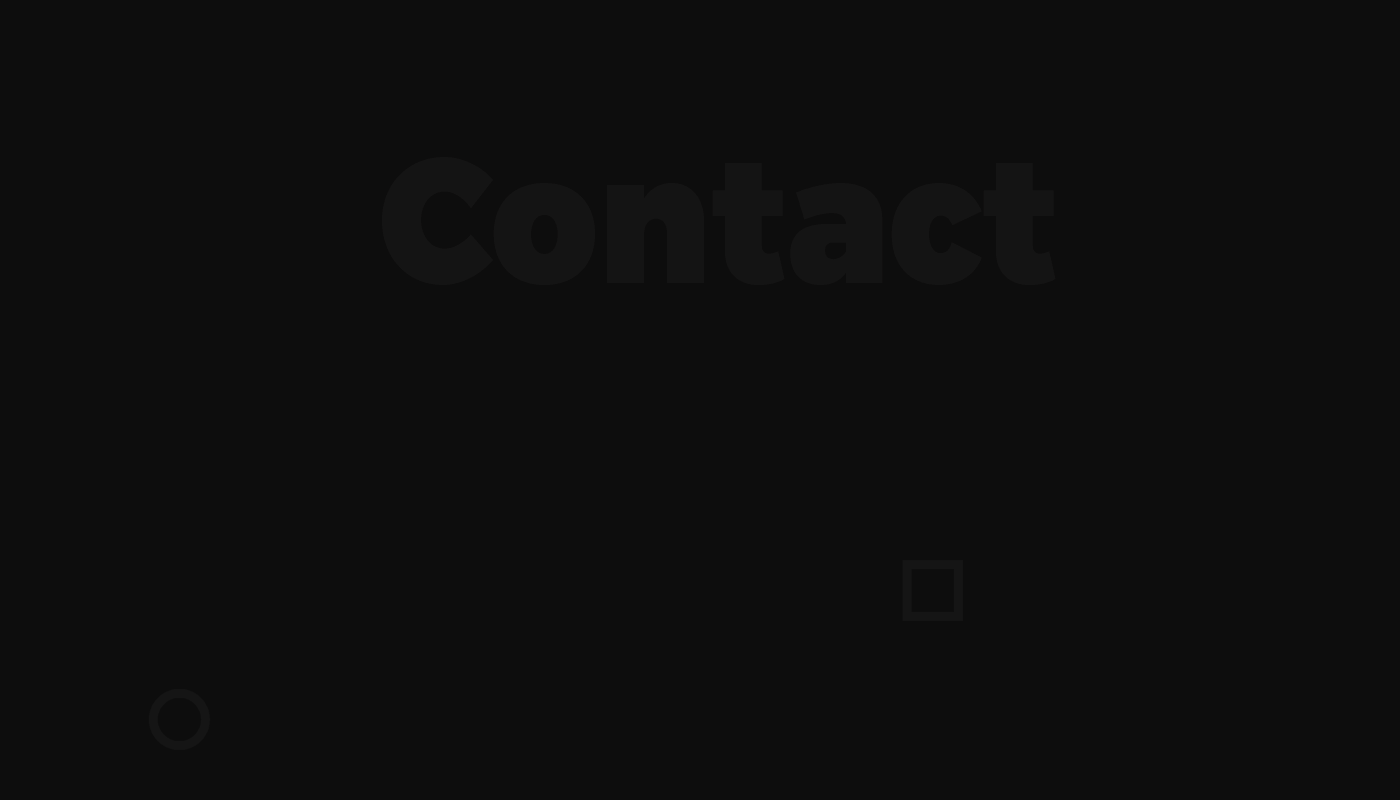
<style>
.page{position:relative;width:1400px;height:800px;background:#0d0d0d}
.page>*{position:absolute;margin:0}
.t1{font:179px "Montserrat-Black";letter-spacing:0.005em;color:#141414;scale:0.92 1}
</style>
<div class="page">
<p class="t1" style="left:382px;top:157px;width:674px;height:129px">Contact</p>
</div>
